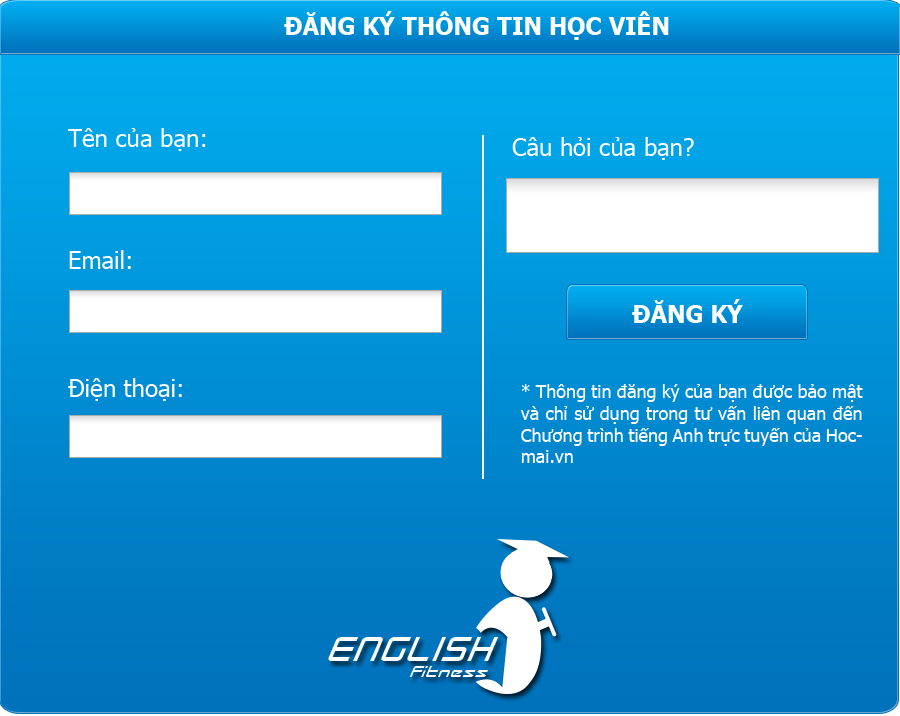
<style>
.page{position:relative;width:900px;height:716px}
.page>*{position:absolute;margin:0}
.t1{font:24px "Tahoma-Bold";color:#ffffff}
.t2{font:24px "Tahoma";color:#ffffff}
.t3{font:18px "Tahoma";color:#ffffff}
</style>
<div class="page">
<p class="t1" style="left:284px;top:11px;width:385px;height:29px">ĐĂNG KÝ THÔNG TIN HỌC VIÊN</p>
<p class="t2" style="left:68px;top:128px;width:138px;height:23px">Tên của bạn:</p>
<p class="t2" style="left:512px;top:137px;width:182px;height:23px">Câu hỏi của bạn?</p>
<p class="t2" style="left:69px;top:250px;width:62px;height:19px">Email:</p>
<p class="t1" style="left:632px;top:299px;width:111px;height:24px">ĐĂNG KÝ</p>
<p class="t2" style="left:68px;top:378px;width:114px;height:23px">Điện thoại:</p>
<p class="t3" style="left:520px;top:384px;width:343px;height:79px;text-align:justify">* Thông tin đăng ký của bạn được bảo mật và chỉ sử dụng trong tư vấn liên quan đến Chương trình tiếng Anh trực tuyến của Hocmai.vn</p>
</div>
